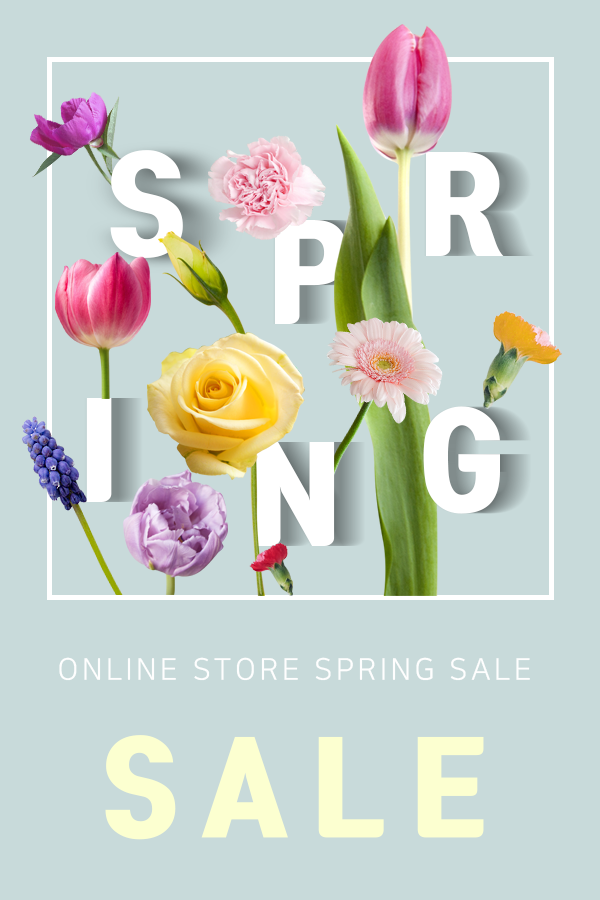
<style>
.page{position:relative;width:600px;height:900px;background:#c8dada}
.page>*{position:absolute;margin:0}
.t1{font:120px "TmonMonsoriBlack";letter-spacing:-0.04em;color:#ffffff}
.t2{font:30px "NanumSquareR";letter-spacing:0.12em;color:#fefefe}
.t3{font:116px "TmonMonsoriBlack";letter-spacing:0.22em;color:#fcffd0}
</style>
<div class="page">
<p class="t1" style="left:110px;top:150px;width:73px;height:108px">S</p>
<p class="t1" style="left:426px;top:152px;width:78px;height:104px">R</p>
<p class="t1" style="left:275px;top:220px;width:74px;height:104px">P</p>
<p class="t1" style="left:86px;top:398px;width:26px;height:104px">I</p>
<p class="t1" style="left:423px;top:406px;width:77px;height:108px">G</p>
<p class="t1" style="left:256px;top:442px;width:79px;height:104px">N</p>
<p class="t2" style="left:59px;top:657px;width:471px;height:24px">ONLINE STORE SPRING SALE</p>
<p class="t3" style="left:105px;top:735px;width:379px;height:105px">SALE</p>
</div>
